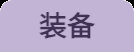
<style>
.page{position:relative;width:134px;height:52px;background:#c1b4d5}
.page>*{position:absolute;margin:0}
.t1{font:28px/28px "WebPSD-18463539-0-Regular";color:#3f3254;font-weight:bold}
</style>
<div class="page">
<p class="t1" style="left:0px;top:0px;width:134px;height:52px;text-align:center">装备</p>
</div>
